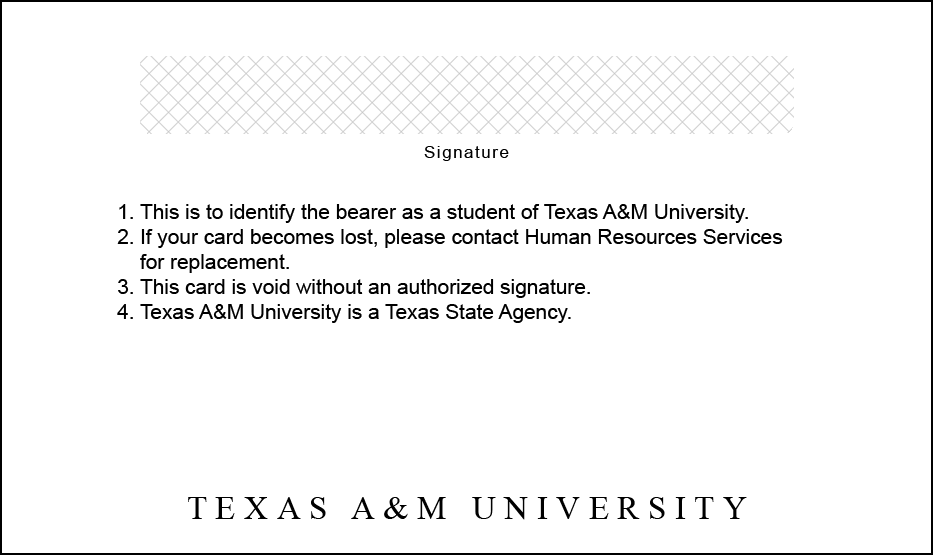
<style>
.page{position:relative;width:933px;height:555px;background:#ffffff}
.page>*{position:absolute;margin:0}
.t1{font:16.7px "ArialMT";letter-spacing:0.1em;color:#000000}
.t2{font:20.8px "ArialMT";color:#000000}
.t3{font:33.3px "TimesNewRomanPSMT";letter-spacing:0.25em;color:#000000}
</style>
<div class="page">
<p class="t1" style="left:424px;top:146px;width:85px;height:15px">Signature</p>
<p class="t2" style="left:117px;top:204px;width:16px;height:115px">1.<br>2.<br><br>3.<br>4.</p>
<p class="t2" style="left:140px;top:204px;width:643px;height:119px">This is to identify the bearer as a student of Texas A&amp;M University.<br>If your card becomes lost, please contact Human Resources Services for replacement.<br>This card is void without an authorized signature.<br>Texas A&amp;M University is a Texas State Agency.</p>
<p class="t3" style="left:188px;top:497px;width:559px;height:23px">TEXAS A&amp;M UNIVERSITY</p>
</div>
